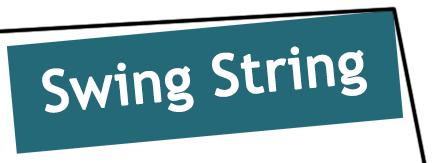
<style>
.page{position:relative;width:432px;height:163px;background:#236977}
.page>*{position:absolute;margin:0}
.t1{font:57px "TrebuchetMS";letter-spacing:-0.005em;color:#ffffff;font-weight:bold}
</style>
<div class="page">
<p class="t1" style="left:42px;top:46px;width:325px;height:67px;rotate:-5deg">Swing String</p>
</div>
